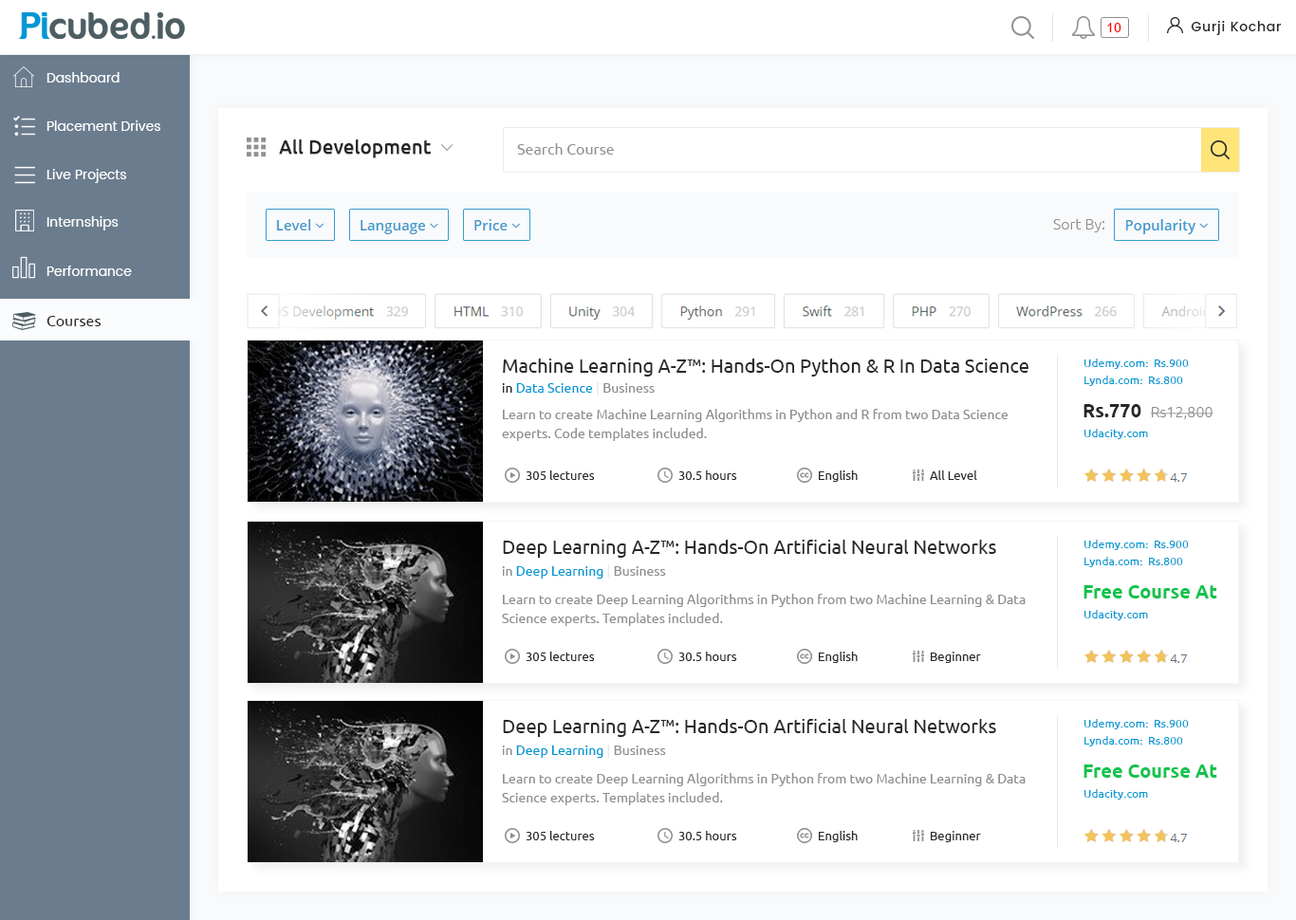
<style>
.page{position:relative;width:1296px;height:920px;background:#ffffff}
.page>*{position:absolute;margin:0}
.t1{font:13.3px "Ubuntu";color:#ff0000}
.t2{font:13.3px "Poppins-Regular";color:#ffffff}
.t3{font:19px "Ubuntu";color:#282828;font-weight:bold}
.t4{font:15.2px "Ubuntu";color:#909090}
.t5{font:15.2px "Ubuntu-Light";color:#909090}
.t6{font:13.3px "Poppins-Regular"}
.t7{font:15.2px "Ubuntu";color:#282828}
.t8{font:19px "Ubuntu";color:#282828}
.t9{font:11.4px "Ubuntu-Medium";color:#0099d2}
.t10{font:13.3px "Ubuntu";color:#0099d2}
.t11{font:13.3px "Ubuntu";color:#282828}
.t12{font:13.3px "Ubuntu";color:#eaeaea}
.t13{font:13.3px "Ubuntu";color:#909090}
.t14{font:13.3px/19px "Ubuntu";color:#909090}
.t15{font:19px "Ubuntu-Bold";color:#282828}
.t16{font:12.3px "Ubuntu";color:#282828}
.t17{font:19px "Ubuntu-Bold";color:#12c34d}
</style>
<div class="page">
<p class="t1" style="left:1107px;top:23px;width:14px;height:9px">10</p>
<p class="t2" style="left:46px;top:72px;width:74px;height:11px">Dashboard</p>
<p class="t2" style="left:46px;top:120px;width:114px;height:11px">Placement Drives</p>
<p class="t3" style="left:279px;top:139px;width:152px;height:19px">All Development</p>
<p class="t4" style="left:517px;top:143px;width:97px;height:12px">Search Course</p>
<p class="t2" style="left:46px;top:169px;width:80px;height:14px">Live Projects</p>
<p class="t2" style="left:46px;top:216px;width:73px;height:15px">Internships</p>
<p class="t5" style="left:1053px;top:219px;width:51px;height:13px">Sort By:</p>
<p class="t2" style="left:46px;top:266px;width:86px;height:10px">Performance</p>
<p class="t6" style="left:46px;top:316px;width:55px;height:9px">Courses</p>
<p class="t7" style="left:46px;top:316px;width:56px;height:10px">Courses</p>
<p class="t8" style="left:503px;top:359px;width:525px;height:18px">Machine Learning A-Z™: Hands-On Python &amp; R In Data Science</p>
<p class="t9" style="left:1083px;top:359px;width:106px;height:10px">Udemy.com:  Rs.900</p>
<p class="t9" style="left:1084px;top:376px;width:99px;height:10px">Lynda.com:  Rs.800</p>
<p class="t10" style="left:502px;top:382px;width:153px;height:14px"><span class="t11">in </span>Data Science <span class="t12">| </span><span class="t13">Business</span></p>
<p class="t14" style="left:502px;top:409px;width:506px;height:32px">Learn to create Machine Learning Algorithms in Python and R from two Data Science <br>experts. Code templates included.</p>
<p class="t5" style="left:1083px;top:404px;width:130px;height:15px"><span class="t15">Rs.770  </span>Rs12,800</p>
<p class="t9" style="left:1083px;top:429px;width:65px;height:10px">Udacity.com</p>
<p class="t16" style="left:526px;top:471px;width:69px;height:9px">305 lectures</p>
<p class="t16" style="left:678px;top:471px;width:59px;height:9px">30.5 hours</p>
<p class="t16" style="left:819px;top:471px;width:39px;height:11px">English</p>
<p class="t16" style="left:930px;top:471px;width:47px;height:9px">All Level</p>
<p class="t8" style="left:503px;top:540px;width:493px;height:18px">Deep Learning A-Z™: Hands-On Artificial Neural Networks</p>
<p class="t9" style="left:1083px;top:540px;width:106px;height:10px">Udemy.com:  Rs.900</p>
<p class="t9" style="left:1084px;top:557px;width:99px;height:10px">Lynda.com:  Rs.800</p>
<p class="t10" style="left:502px;top:565px;width:164px;height:14px"><span class="t13">in </span>Deep Learning <span class="t12">| </span><span class="t13">Business</span></p>
<p class="t14" style="left:502px;top:594px;width:523px;height:32px">Learn to create Deep Learning Algorithms in Python from two Machine Learning &amp; Data <br>Science experts. Templates included.</p>
<p class="t17" style="left:1083px;top:585px;width:134px;height:14px">Free Course At</p>
<p class="t9" style="left:1083px;top:610px;width:65px;height:10px">Udacity.com</p>
<p class="t16" style="left:526px;top:652px;width:69px;height:9px">305 lectures</p>
<p class="t16" style="left:678px;top:652px;width:59px;height:9px">30.5 hours</p>
<p class="t16" style="left:819px;top:652px;width:39px;height:11px">English</p>
<p class="t16" style="left:931px;top:652px;width:50px;height:11px">Beginner</p>
<p class="t8" style="left:503px;top:719px;width:493px;height:18px">Deep Learning A-Z™: Hands-On Artificial Neural Networks</p>
<p class="t9" style="left:1083px;top:719px;width:106px;height:11px">Udemy.com:  Rs.900</p>
<p class="t9" style="left:1084px;top:736px;width:99px;height:11px">Lynda.com:  Rs.800</p>
<p class="t10" style="left:502px;top:745px;width:164px;height:13px"><span class="t13">in </span>Deep Learning <span class="t12">| </span><span class="t13">Business</span></p>
<p class="t14" style="left:502px;top:773px;width:523px;height:32px">Learn to create Deep Learning Algorithms in Python from two Machine Learning &amp; Data <br>Science experts. Templates included.</p>
<p class="t17" style="left:1083px;top:765px;width:134px;height:13px">Free Course At</p>
<p class="t9" style="left:1083px;top:789px;width:65px;height:11px">Udacity.com</p>
<p class="t16" style="left:526px;top:831px;width:69px;height:10px">305 lectures</p>
<p class="t16" style="left:678px;top:831px;width:59px;height:10px">30.5 hours</p>
<p class="t16" style="left:819px;top:831px;width:39px;height:11px">English</p>
<p class="t16" style="left:931px;top:831px;width:50px;height:11px">Beginner</p>
</div>
